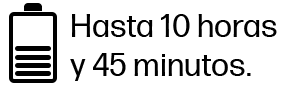
<style>
.page{position:relative;width:296px;height:86px;background:#ffffff}
.page>*{position:absolute;margin:0}
.t1{font:32px "FormaDJRMicro-Regular";color:#000000}
</style>
<div class="page">
<p class="t1" style="left:70px;top:14px;width:207px;height:67px">Hasta 10 horas y 45 minutos.</p>
</div>
